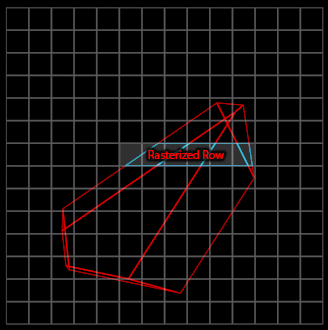
<style>
.page{position:relative;width:328px;height:330px;background:#000000}
.page>*{position:absolute;margin:0}
.t1{font:12px "MyriadPro-Regular";color:#ff0000}
</style>
<div class="page">
<p class="t1" style="left:148px;top:150px;width:76px;height:9px">Rasterized Row</p>
</div>
